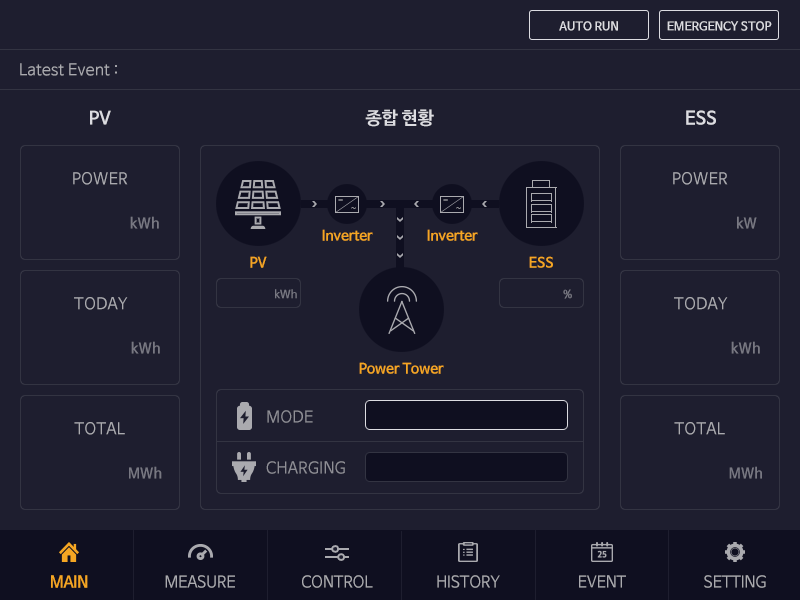
<style>
.page{position:relative;width:800px;height:600px;background:#1e1e2f}
.page>*{position:absolute;margin:0}
.t1{font:12px "NanumBarunGothicBold";color:#dcdce1}
.t2{font:16px "NanumBarunGothic";color:#aaaaaf}
.t3{font:18px "NanumBarunGothicBold";color:#dcdce1}
.t4{font:9.7px "NanumBarunGothicBold"}
.t5{font:9.7px "NanumBarunGothic"}
.t6{font:14px "NanumBarunGothicBold";color:#787882}
.t7{font:14px "NanumBarunGothicBold";color:#f5a623}
.t8{font:11px "NanumBarunGothicBold";color:#787882}
.t9{font:16px "NanumBarunGothic";color:#8f8f96}
.t10{font:16px "NanumBarunGothicBold";letter-spacing:-0.025em;color:#f5a623}
.t11{font:16px "NanumBarunGothic";letter-spacing:-0.025em;color:#aaaaaf}
</style>
<div class="page">
<p class="t1" style="left:559px;top:21px;width:59px;height:10px">AUTO RUN</p>
<p class="t1" style="left:667px;top:21px;width:105px;height:10px">EMERGENCY STOP</p>
<p class="t2" style="left:20px;top:63px;width:97px;height:13px">Latest Event :</p>
<p class="t3" style="left:90px;top:110px;width:21px;height:15px">PV</p>
<p class="t3" style="left:365px;top:109px;width:69px;height:18px">종합 현황</p>
<p class="t3" style="left:686px;top:110px;width:30px;height:15px">ESS</p>
<p class="t2" style="left:73px;top:172px;width:55px;height:13px">POWER</p>
<p class="t2" style="left:673px;top:172px;width:55px;height:13px">POWER</p>
<p class="t4" style="left:338px;top:199px;width:5px;height:2px">-</p>
<p class="t5" style="left:351px;top:207px;width:5px;height:2px">~</p>
<p class="t4" style="left:443px;top:199px;width:5px;height:2px">-</p>
<p class="t5" style="left:456px;top:207px;width:5px;height:2px">~</p>
<p class="t6" style="left:130px;top:216px;width:29px;height:13px">kWh</p>
<p class="t6" style="left:737px;top:216px;width:20px;height:13px">kW</p>
<p class="t7" style="left:322px;top:229px;width:51px;height:12px">Inverter</p>
<p class="t7" style="left:427px;top:229px;width:51px;height:12px">Inverter</p>
<p class="t7" style="left:250px;top:256px;width:17px;height:12px">PV</p>
<p class="t7" style="left:529px;top:256px;width:24px;height:12px">ESS</p>
<p class="t8" style="left:275px;top:289px;width:22px;height:10px">kWh</p>
<p class="t8" style="left:563px;top:289px;width:9px;height:10px">%</p>
<p class="t2" style="left:74px;top:297px;width:54px;height:13px">TODAY</p>
<p class="t2" style="left:674px;top:297px;width:54px;height:13px">TODAY</p>
<p class="t6" style="left:131px;top:341px;width:29px;height:13px">kWh</p>
<p class="t6" style="left:731px;top:341px;width:29px;height:13px">kWh</p>
<p class="t7" style="left:359px;top:362px;width:85px;height:12px">Power Tower</p>
<p class="t9" style="left:267px;top:410px;width:46px;height:13px">MODE</p>
<p class="t2" style="left:74px;top:422px;width:51px;height:13px">TOTAL</p>
<p class="t2" style="left:674px;top:422px;width:51px;height:13px">TOTAL</p>
<p class="t9" style="left:266px;top:461px;width:79px;height:13px">CHARGING</p>
<p class="t6" style="left:129px;top:466px;width:33px;height:13px">MWh</p>
<p class="t6" style="left:729px;top:466px;width:33px;height:13px">MWh</p>
<p class="t10" style="left:51px;top:575px;width:37px;height:13px">MAIN</p>
<p class="t11" style="left:165px;top:575px;width:70px;height:13px">MEASURE</p>
<p class="t11" style="left:302px;top:575px;width:71px;height:13px">CONTROL</p>
<p class="t11" style="left:437px;top:575px;width:63px;height:13px">HISTORY</p>
<p class="t11" style="left:579px;top:575px;width:47px;height:13px">EVENT</p>
<p class="t11" style="left:704px;top:575px;width:62px;height:13px">SETTING</p>
</div>
